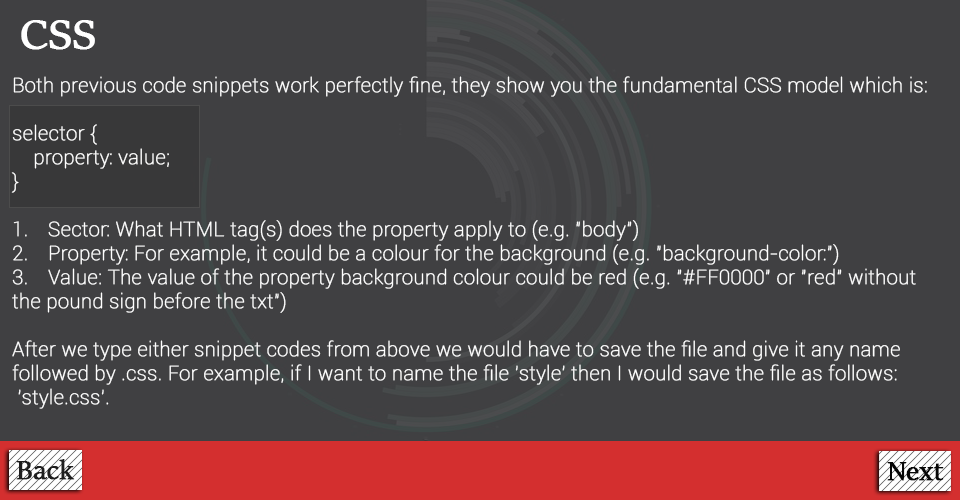
<style>
.page{position:relative;width:960px;height:500px;background:#404042}
.page>*{position:absolute;margin:0}
.t1{font:48px "SitkaBanner";color:#ffffff;font-weight:bold}
.t2{font:20px "Roboto-Thin";color:#ffffff;font-weight:bold}
.t3{font:30px "SitkaBanner";color:#1e1e1e;font-weight:bold}
.t4{font:30px "SitkaBanner";color:#060606;font-weight:bold}
</style>
<div class="page">
<p class="t1" style="left:21px;top:20px;width:74px;height:30px">CSS</p>
<p class="t2" style="left:11px;top:76px;width:916px;height:333px">Both previous code snippets work perfectly fine, they show you the fundamental CSS model which is:<br><br>selector {<br>    property: value;<br>}<br><br>1. Sector: What HTML tag(s) does the property apply to (e.g. "body")<br>2. Property: For example, it could be a colour for the background (e.g. "background-color:")<br>3. Value: The value of the property background colour could be red (e.g. "#FF0000" or "red" without the pound sign before the txt")<br><br>After we type either snippet codes from above we would have to save the file and give it any name followed by .css. For example, if I want to name the file 'style' then I would save the file as follows:<br> 'style.css'.</p>
<p class="t3" style="left:16px;top:459px;width:59px;height:21px">Back</p>
<p class="t4" style="left:887px;top:462px;width:57px;height:19px">Next</p>
</div>
